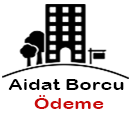
<style>
.page{position:relative;width:133px;height:130px;background:#ffffff}
.page>*{position:absolute;margin:0}
.t1{font:15.8px "ArialRoundedMTBold";color:#000000;scale:1.27 1}
.t2{font:15.8px "ArialRoundedMTBold";color:#ca0a0a;scale:1.27 1}
</style>
<div class="page">
<p class="t1" style="left:8px;top:79px;width:116px;height:30px;text-align:center">Aidat Borcu <br><span class="t2">Ödeme</span></p>
</div>
